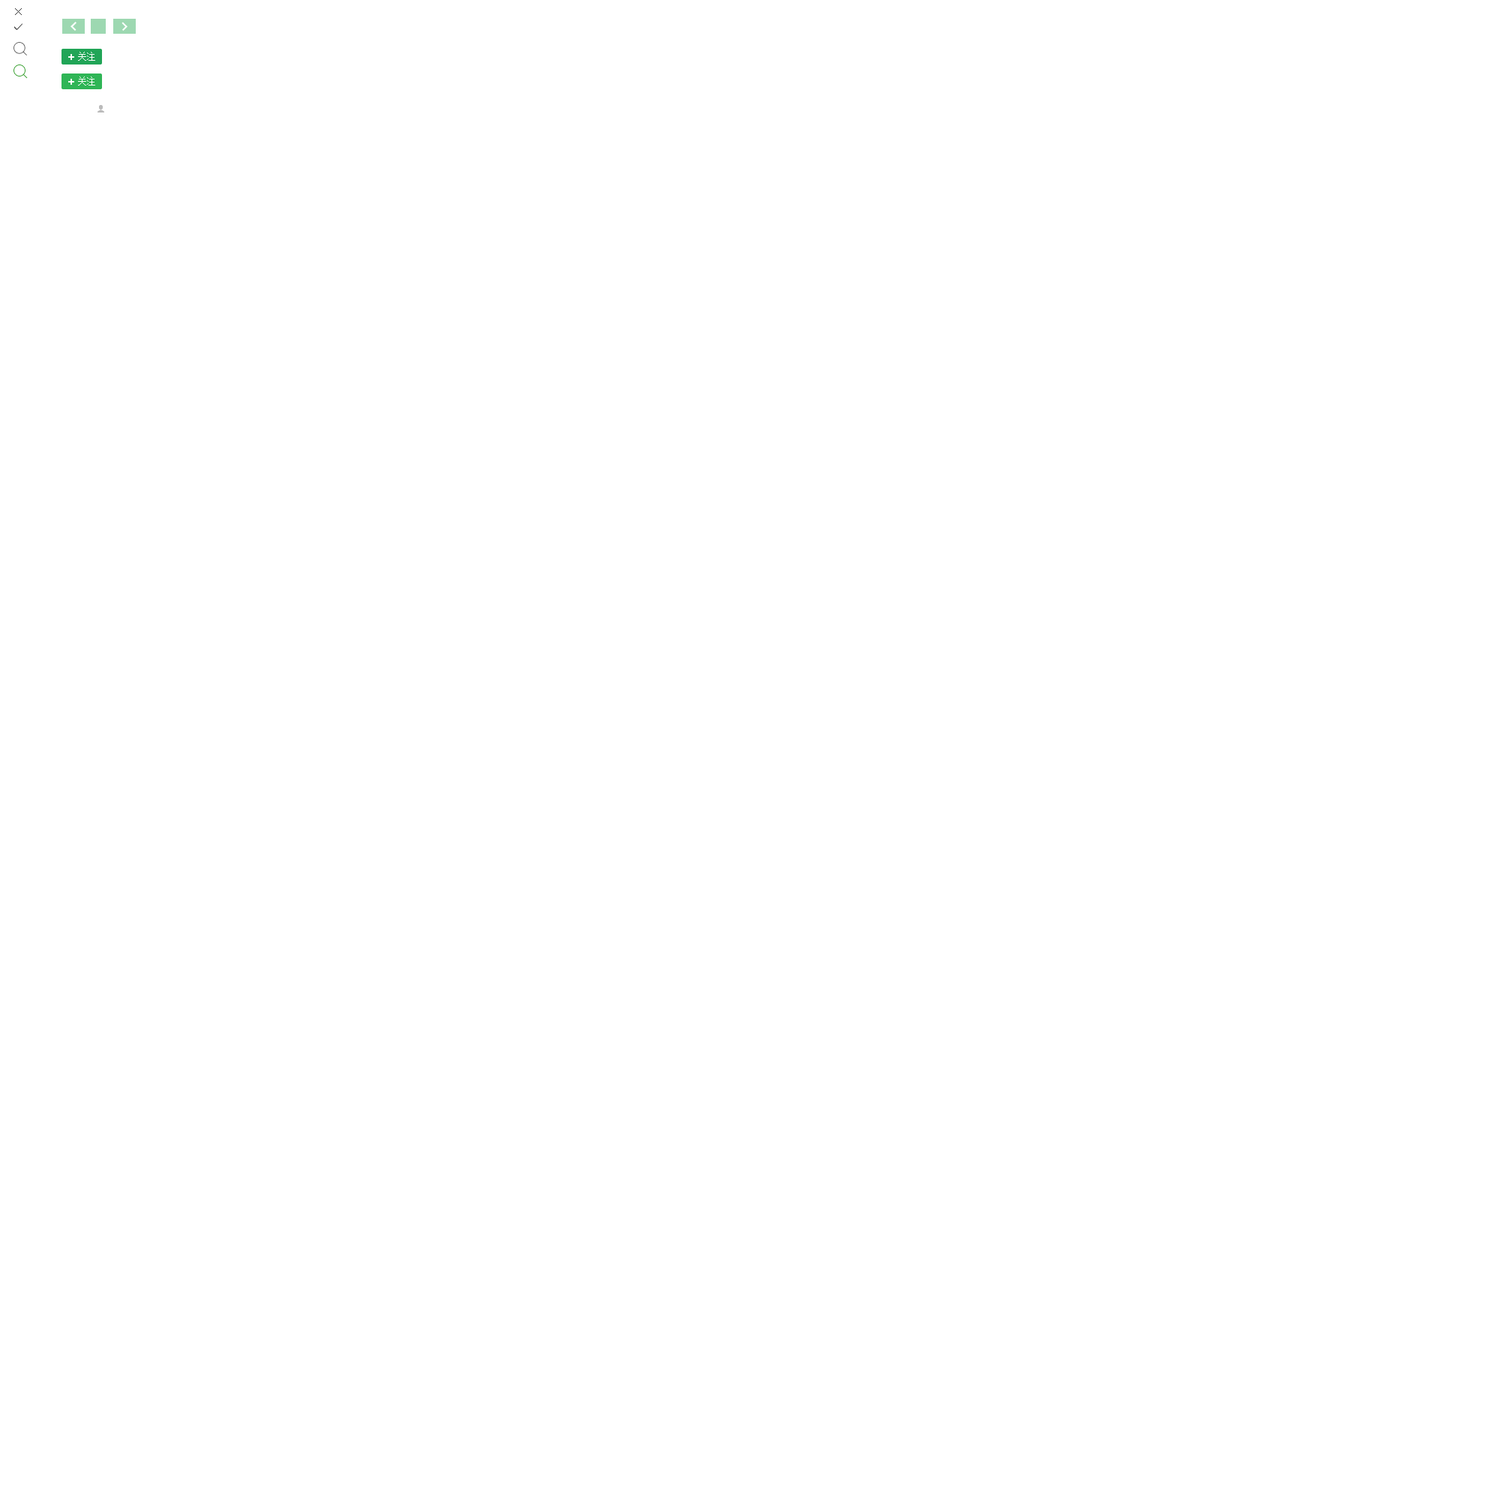
<style>
.page{position:relative;width:1500px;height:1500px;background:#ffffff}
.page>*{position:absolute;margin:0}
.t1{font:9px "SimSun";color:#ffffff}
</style>
<div class="page">
<p class="t1" style="left:78px;top:52px;width:17px;height:9px">关注</p>
<p class="t1" style="left:78px;top:76px;width:17px;height:10px">关注</p>
</div>
